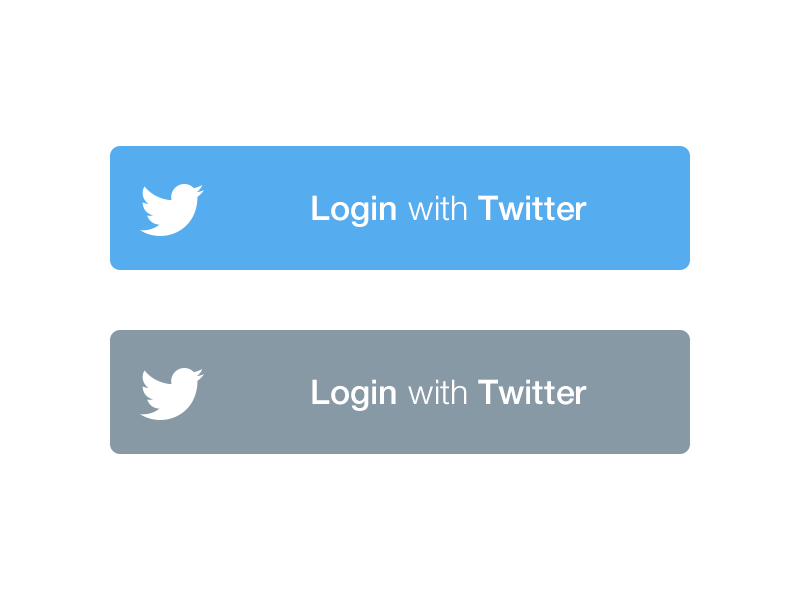
<style>
.page{position:relative;width:800px;height:600px;background:#ffffff}
.page>*{position:absolute;margin:0}
.t1{font:34px "HelveticaNeue-Medium";color:#ffffff}
.t2{font:34px "HelveticaNeue-Light";color:#ffffff}
</style>
<div class="page">
<p class="t1" style="left:312px;top:195px;width:275px;height:32px">Login <span class="t2">with</span> Twitter</p>
<p class="t1" style="left:312px;top:379px;width:275px;height:32px">Login <span class="t2">with</span> Twitter</p>
</div>
